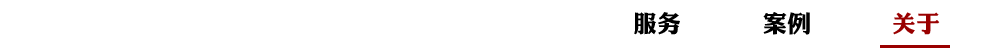
<style>
.page{position:relative;width:1002px;height:50px;background:#ffffff}
.page>*{position:absolute;margin:0}
.t1{font:24px "DFPLiJinHeiW8";color:#000000}
.t2{font:24px "DFPLiJinHeiW8";color:#990000}
</style>
<div class="page">
<p class="t1" style="left:634px;top:12px;width:46px;height:23px">服务</p>
<p class="t1" style="left:763px;top:12px;width:47px;height:23px">案例</p>
<p class="t2" style="left:893px;top:12px;width:47px;height:23px">关于</p>
</div>
